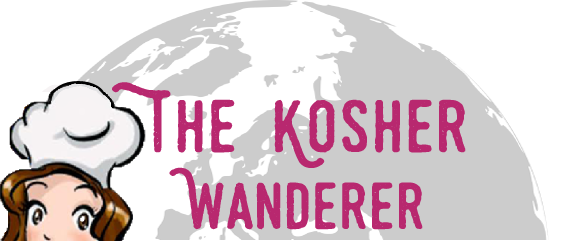
<style>
.page{position:relative;width:564px;height:241px;background:#ffffff}
.page>*{position:absolute;margin:0}
.t1{font:72px "SwistblnkMonthoers";color:#b8286f;scale:1.17 1}
.t2{font:64px "SwistblnkMonthoers";color:#b8286f;scale:1.17 1}
</style>
<div class="page">
<p class="t1" style="left:112px;top:82px;width:354px;height:148px;text-align:center">The Kosher <br><span class="t2">Wanderer</span></p>
</div>
